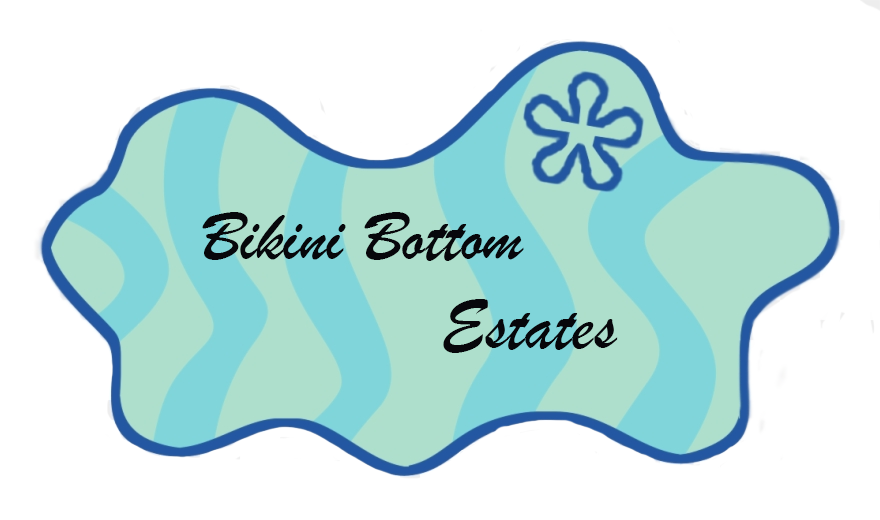
<style>
.page{position:relative;width:880px;height:520px;background:#ffffff}
.page>*{position:absolute;margin:0}
.t1{font:72px "BrushScriptMT";color:#07070b}
</style>
<div class="page">
<p class="t1" style="left:202px;top:212px;width:322px;height:49px">Bikini Bottom</p>
<p class="t1" style="left:443px;top:299px;width:175px;height:54px">Estates</p>
</div>
